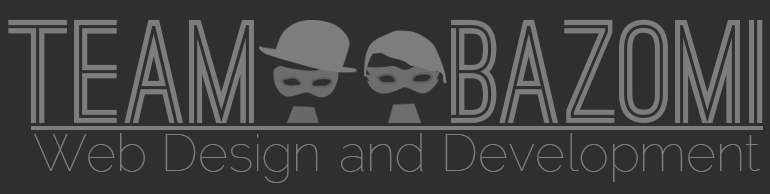
<style>
.page{position:relative;width:770px;height:194px;background:#2f2f2f}
.page>*{position:absolute;margin:0}
.t1{font:139.6px "OstrichSans-Bold";color:#7d7d7e}
.t2{font:139.6px "OstrichSans-Bold";letter-spacing:-0.02em;color:#7d7d7e}
.t3{font:139.6px "OstrichSans-Bold";letter-spacing:-0.04em;color:#7d7d7e}
.t4{font:139.6px "OstrichSans-Bold";letter-spacing:-0.02em;color:#7d7d7e;scale:0.9 1}
.t5{font:52px "Raleway-Thin";color:#7d7d7e}
</style>
<div class="page">
<p class="t1" style="left:8px;top:19px;width:246px;height:104px">T<span class="t2">E</span>AM</p>
<p class="t3" style="left:451px;top:19px;width:312px;height:104px">B<span class="t1">A</span><span class="t4">Z</span><span class="t1">O</span>M<span class="t2">I</span></p>
<p class="t5" style="left:34px;top:133px;width:726px;height:50px">Web Design and Development</p>
</div>
